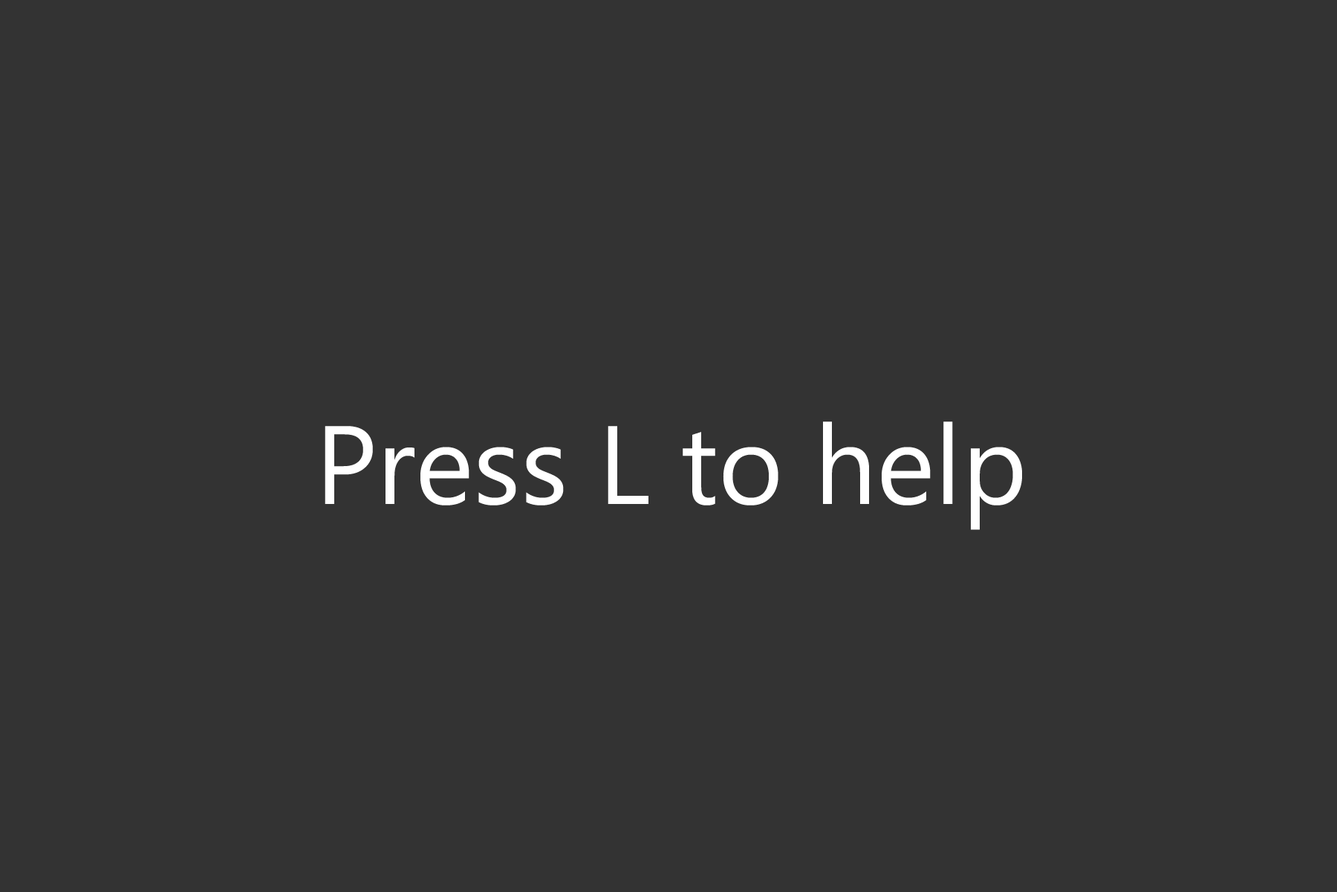
<style>
.page{position:relative;width:1337px;height:892px;background:#333333}
.page>*{position:absolute;margin:0}
.t1{font:111px "NirmalaUI";color:#ffffff}
</style>
<div class="page">
<p class="t1" style="left:325px;top:421px;width:697px;height:109px">Press L to help</p>
</div>
